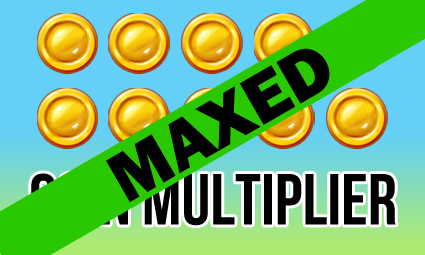
<style>
.page{position:relative;width:425px;height:255px}
.page>*{position:absolute;margin:0}
.t1{font:72px "FranklinGothic-Heavy";color:#000000}
.t2{font:72px "BebasNeueBold";color:#000000}
</style>
<div class="page">
<p class="t1" style="left:106px;top:48px;width:224px;height:154px;rotate:-30deg">MAXED</p>
<p class="t2" style="left:31px;top:173px;width:365px;height:53px">COIN MULTIPLIER</p>
</div>
